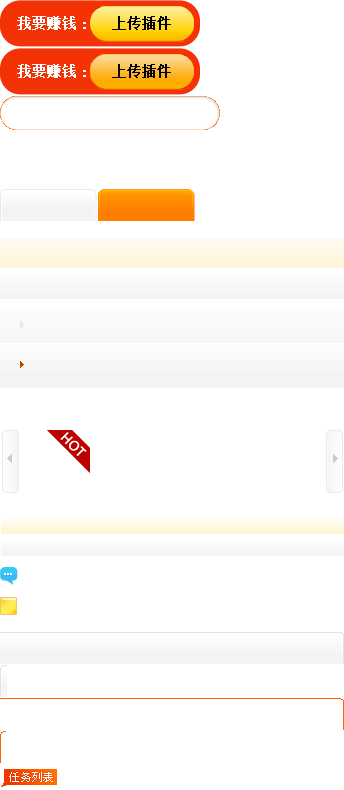
<style>
.page{position:relative;width:344px;height:790px;background:#ffffff}
.page>*{position:absolute;margin:0}
.t1{font:14px "SimSun";color:#ffffff;font-weight:bold}
.t2{font:14px "SimSun";color:#000000;font-weight:bold}
</style>
<div class="page">
<p class="t1" style="left:17px;top:16px;width:59px;height:14px">我要赚钱</p>
<p class="t2" style="left:112px;top:16px;width:59px;height:14px">上传插件</p>
<p class="t1" style="left:17px;top:64px;width:59px;height:14px">我要赚钱</p>
<p class="t2" style="left:112px;top:64px;width:59px;height:14px">上传插件</p>
</div>
